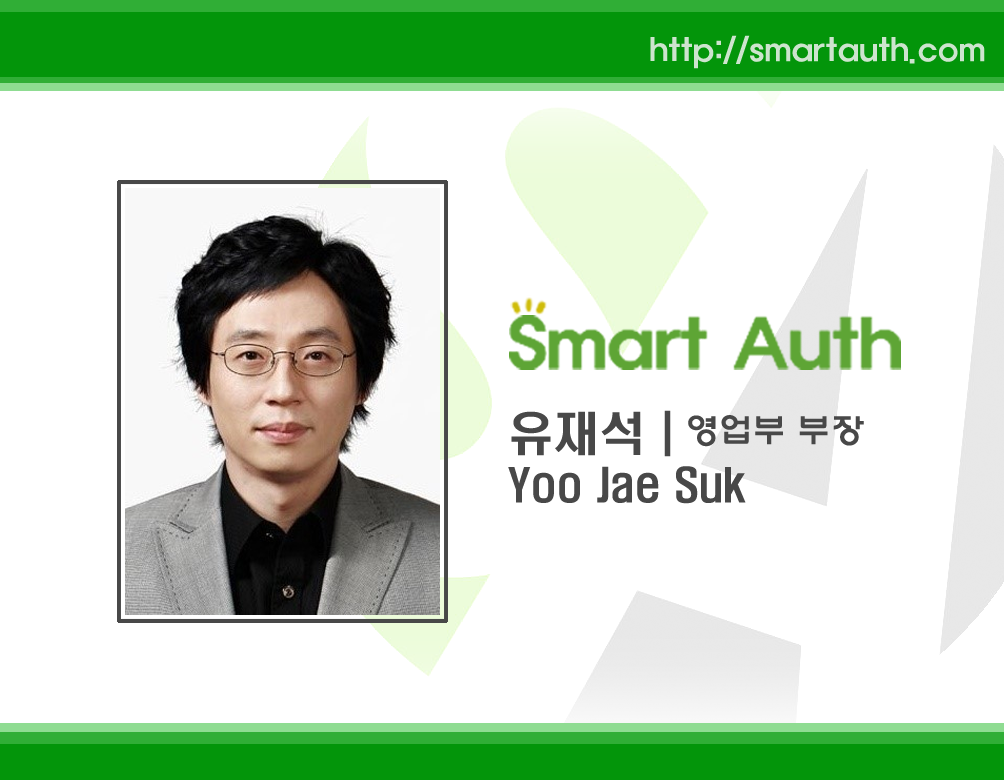
<style>
.page{position:relative;width:1004px;height:780px;background:#ffffff}
.page>*{position:absolute;margin:0}
.t1{font:33.3px "HaanYHeadM";color:#cde4ce}
.t2{font:41.7px "H2hdrM";color:#484848}
.t3{font:45.8px "H2hdrM";color:#484848}
.t4{font:33.3px "HYwulM";color:#484848}
</style>
<div class="page">
<p class="t1" style="left:650px;top:35px;width:335px;height:34px">http://smartauth.com</p>
<p class="t2" style="left:508px;top:410px;width:238px;height:94px"><span class="t3">유재석 |<br></span>Yoo Jae Suk</p>
<p class="t4" style="left:688px;top:415px;width:176px;height:32px">영업부 부장</p>
</div>
